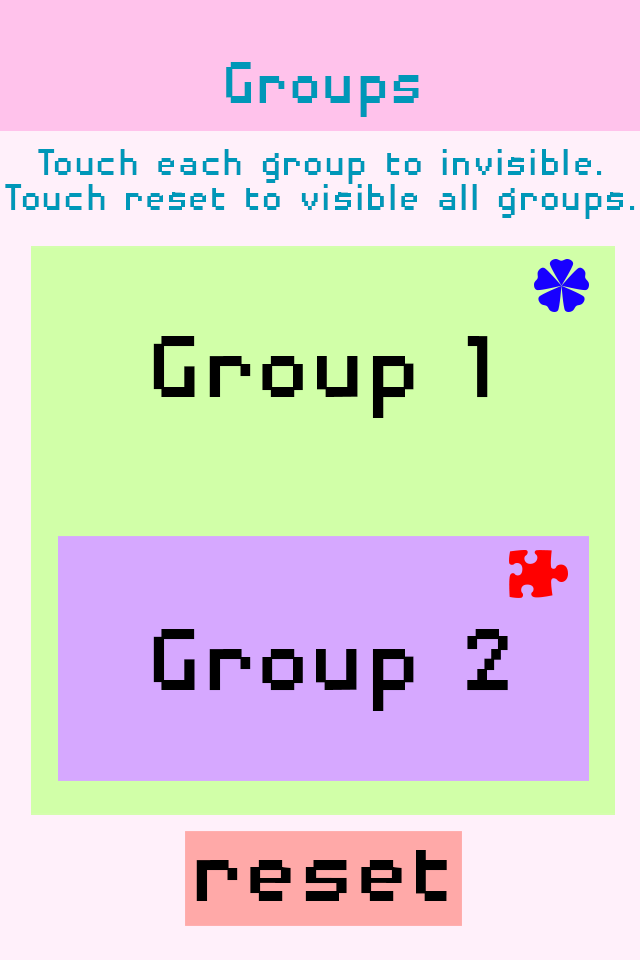
<style>
.page{position:relative;width:640px;height:960px;background:#d1ffa8}
.page>*{position:absolute;margin:0}
.t1{font:76.6px "DisposableDroidBB";color:#0097b8;scale:0.91 1}
.t2{font:49.5px/35.1px "DisposableDroidBB";color:#0097b8;scale:0.91 1}
.t3{font:114.8px "DisposableDroidBB";color:#000000}
</style>
<div class="page">
<p class="t1" style="left:226px;top:62px;width:193px;height:55px">Groups</p>
<p class="t2" style="left:5px;top:149px;width:630px;height:70px;text-align:center">Touch each group to invisible.<br>Touch reset to visible all groups.</p>
<p class="t3" style="left:153px;top:336px;width:335px;height:82px">Group 1</p>
<p class="t3" style="left:153px;top:629px;width:355px;height:82px">Group 2</p>
</div>
